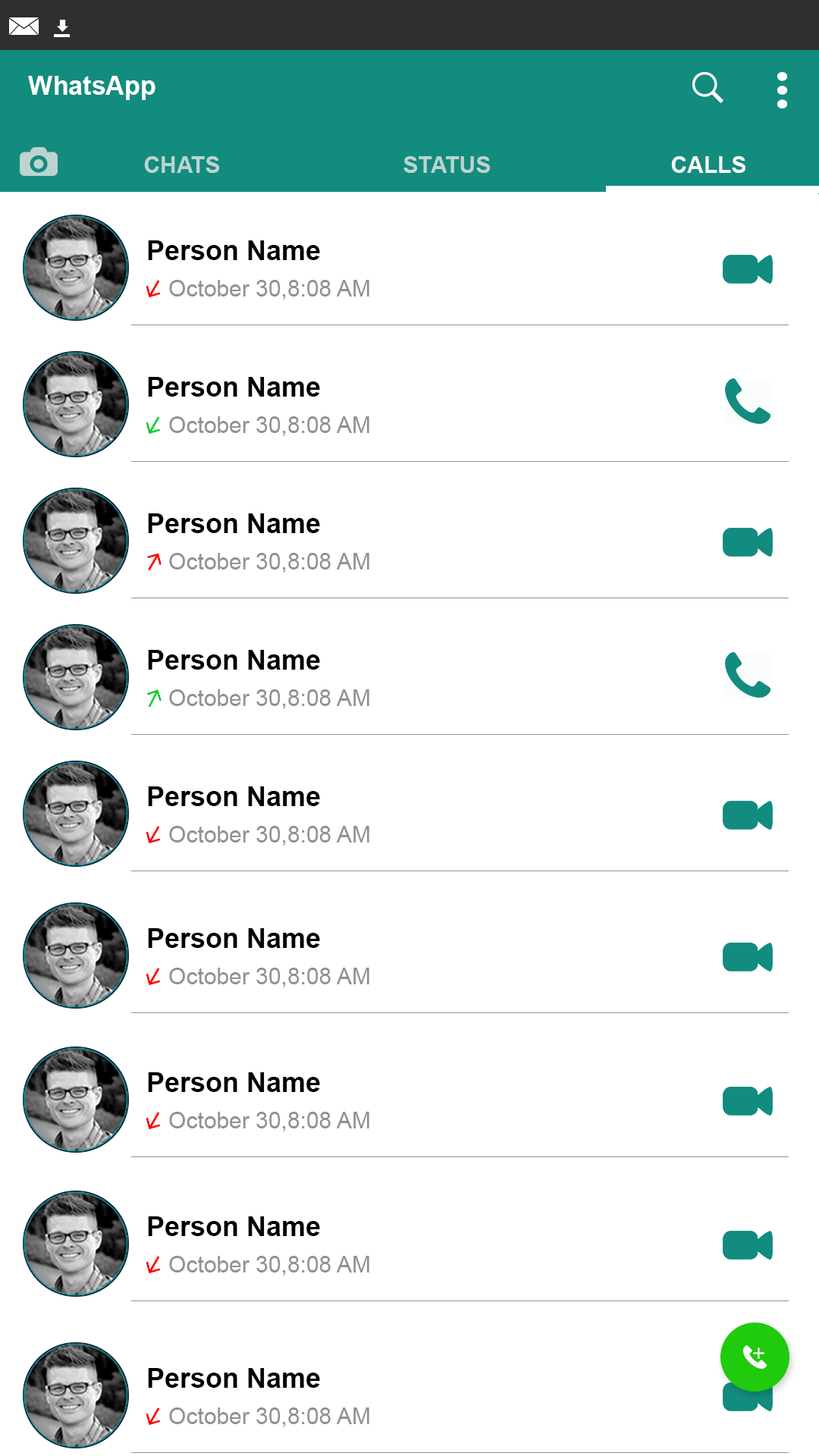
<style>
.page{position:relative;width:819px;height:1456px;background:#ffffff}
.page>*{position:absolute;margin:0}
.t1{font:25.8px "Arial-BoldMT";color:#ffffff}
.t2{font:22.7px "Arial-BoldMT";color:#bdd3d0}
.t3{font:22.7px "Arial-BoldMT";color:#f9fafa}
.t4{font:27.3px "Arial-BoldMT";color:#000000}
.t5{font:22.7px "ArialMT";color:#919191}
</style>
<div class="page">
<p class="t1" style="left:28px;top:76px;width:127px;height:24px">WhatsApp</p>
<p class="t2" style="left:144px;top:156px;width:75px;height:17px">CHATS</p>
<p class="t2" style="left:403px;top:156px;width:87px;height:17px">STATUS</p>
<p class="t3" style="left:671px;top:156px;width:74px;height:17px">CALLS</p>
<p class="t4" style="left:148px;top:240px;width:172px;height:20px">Person Name</p>
<p class="t5" style="left:169px;top:280px;width:200px;height:20px">October 30,8:08 AM</p>
<p class="t4" style="left:148px;top:377px;width:172px;height:20px">Person Name</p>
<p class="t5" style="left:169px;top:416px;width:200px;height:20px">October 30,8:08 AM</p>
<p class="t4" style="left:148px;top:513px;width:172px;height:20px">Person Name</p>
<p class="t5" style="left:169px;top:553px;width:200px;height:20px">October 30,8:08 AM</p>
<p class="t4" style="left:148px;top:650px;width:172px;height:20px">Person Name</p>
<p class="t5" style="left:169px;top:689px;width:200px;height:20px">October 30,8:08 AM</p>
<p class="t4" style="left:148px;top:786px;width:172px;height:20px">Person Name</p>
<p class="t5" style="left:169px;top:826px;width:200px;height:20px">October 30,8:08 AM</p>
<p class="t4" style="left:148px;top:928px;width:172px;height:20px">Person Name</p>
<p class="t5" style="left:169px;top:968px;width:200px;height:19px">October 30,8:08 AM</p>
<p class="t4" style="left:148px;top:1072px;width:172px;height:20px">Person Name</p>
<p class="t5" style="left:169px;top:1112px;width:200px;height:19px">October 30,8:08 AM</p>
<p class="t4" style="left:148px;top:1216px;width:172px;height:20px">Person Name</p>
<p class="t5" style="left:169px;top:1256px;width:200px;height:19px">October 30,8:08 AM</p>
<p class="t4" style="left:148px;top:1368px;width:172px;height:20px">Person Name</p>
<p class="t5" style="left:169px;top:1407px;width:200px;height:20px">October 30,8:08 AM</p>
</div>
